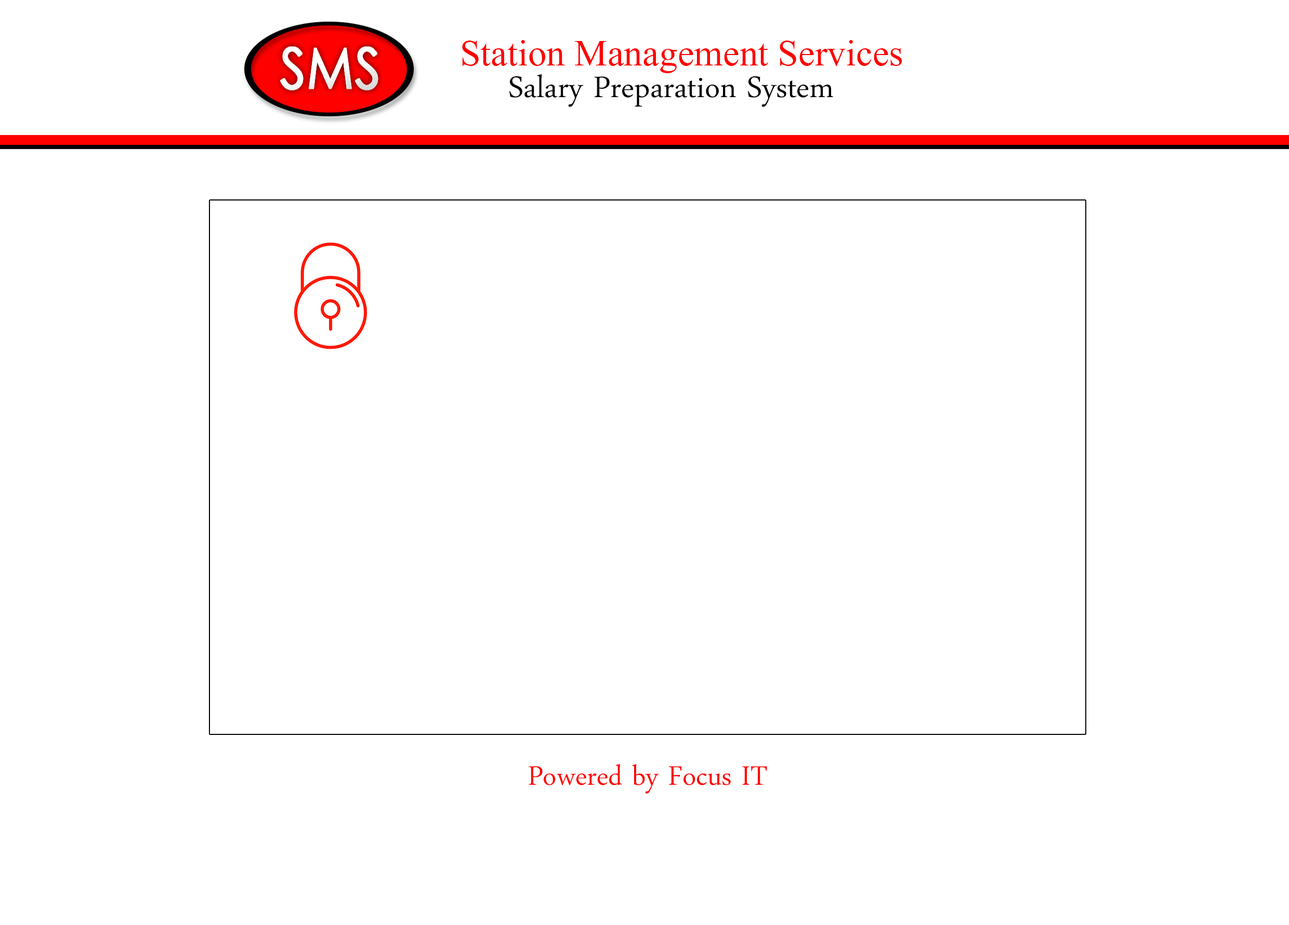
<style>
.page{position:relative;width:1289px;height:925px;background:#ffffff}
.page>*{position:absolute;margin:0}
.t1{font:48px "Kokila";color:#fe0000}
.t2{font:43.6px "DaunPenh";color:#000000}
.t3{font:39.3px "DaunPenh";color:#fe0000}
</style>
<div class="page">
<p class="t1" style="left:462px;top:40px;width:440px;height:33px">Station Management Services</p>
<p class="t2" style="left:509px;top:74px;width:324px;height:33px">Salary Preparation System</p>
<p class="t3" style="left:528px;top:764px;width:239px;height:30px">Powered by Focus IT</p>
</div>
